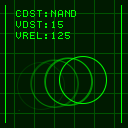
<style>
.page{position:relative;width:128px;height:128px;background:#001a00}
.page>*{position:absolute;margin:0}
.t1{font:9px "Terminal";letter-spacing:0.1em;color:#00ff00}
</style>
<div class="page">
<p class="t1" style="left:16px;top:10px;width:60px;height:29px">CDST:NAND<br>VDST:15<br>VREL:125</p>
</div>
